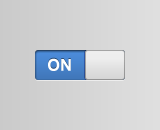
<style>
.page{position:relative;width:160px;height:130px}
.page>*{position:absolute;margin:0}
.t1{font:16.3px "Helvetica-Bold";color:#ffffff}
</style>
<div class="page">
<p class="t1" style="left:48px;top:58px;width:23px;height:13px">ON</p>
</div>
